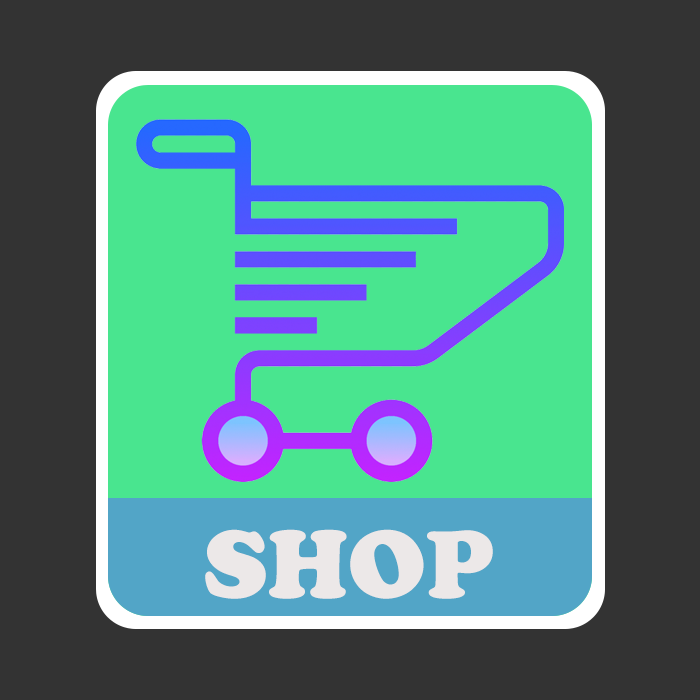
<style>
.page{position:relative;width:700px;height:700px;background:#333333}
.page>*{position:absolute;margin:0}
.t1{font:100px "CooperBlack";color:#ece8e8}
</style>
<div class="page">
<p class="t1" style="left:205px;top:529px;width:288px;height:70px">SHOP</p>
</div>
